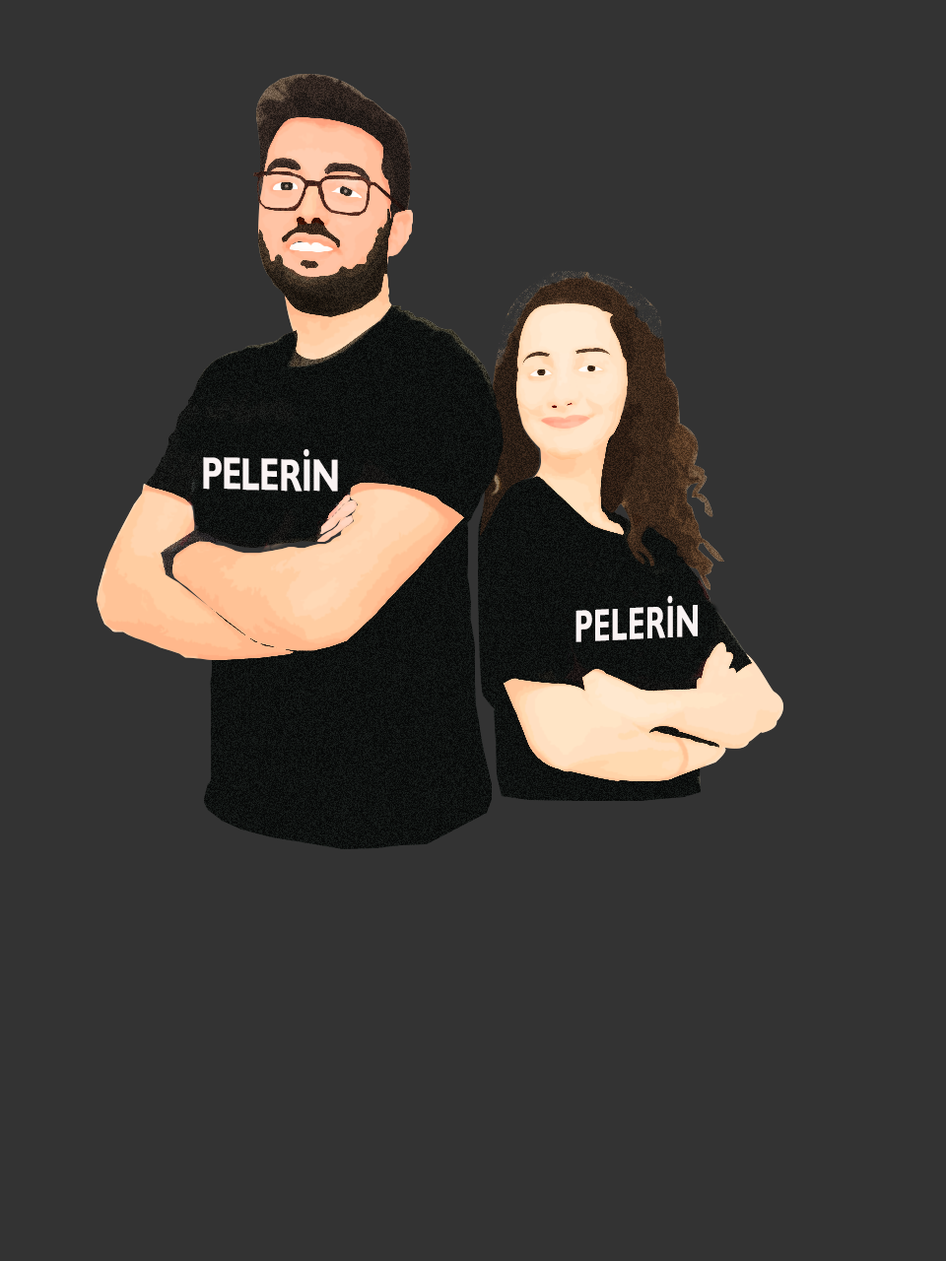
<style>
.page{position:relative;width:946px;height:1261px;background:#333333}
.page>*{position:absolute;margin:0}
.t1{font:45.8px "GillSansNova-Bold";letter-spacing:-0.02em;color:#faf3f3;text-transform:uppercase;scale:0.73 1}
.t2{font:45.8px "GillSansNova-Bold";color:#faf3f3;scale:0.64 1}
</style>
<div class="page">
<p class="t1" style="left:203px;top:449px;width:135px;height:43px;rotate:1deg">PELERİN</p>
<p class="t2" style="left:575px;top:595px;width:122px;height:47px;rotate:-3deg">PELERİN</p>
</div>
